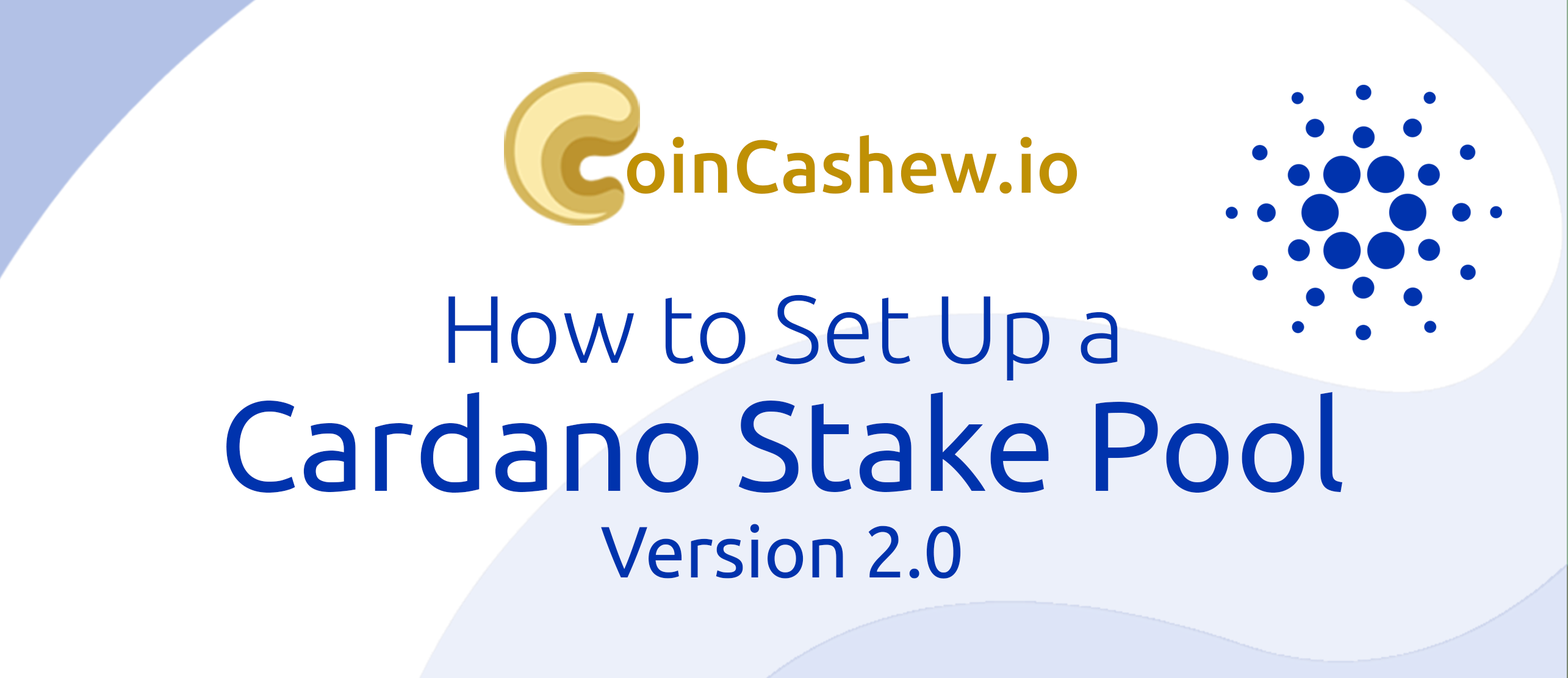
<style>
.page{position:relative;width:1568px;height:678px;background:#ffffff}
.page>*{position:absolute;margin:0}
.t1{font:74.6px "Ubuntu-Medium";color:#bf9004}
.t2{font:127.8px/127.8px "Ubuntu-Regular";color:#0033ad}
.t3{font:95.8px/127.8px "Ubuntu-Light";color:#0033ad}
.t4{font:72.4px "Ubuntu-Regular";color:#0033ad}
</style>
<div class="page">
<p class="t1" style="left:627px;top:135px;width:450px;height:59px">oinCashew.io</p>
<p class="t2" style="left:226px;top:295px;width:1117px;height:284px;text-align:center"><span class="t3">How to Set Up a <br></span>Cardano Stake Pool<br><span class="t4">Version 2.0</span></p>
</div>
